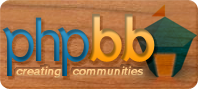
<style>
.page{position:relative;width:201px;height:91px}
.page>*{position:absolute;margin:0}
.t1{font:12px "MS Sans Serif";letter-spacing:0.025em;color:#ffd08c;font-weight:bold;font-style:italic}
</style>
<div class="page">
<p class="t1" style="left:16px;top:66px;width:128px;height:12px">creating   communities</p>
</div>
